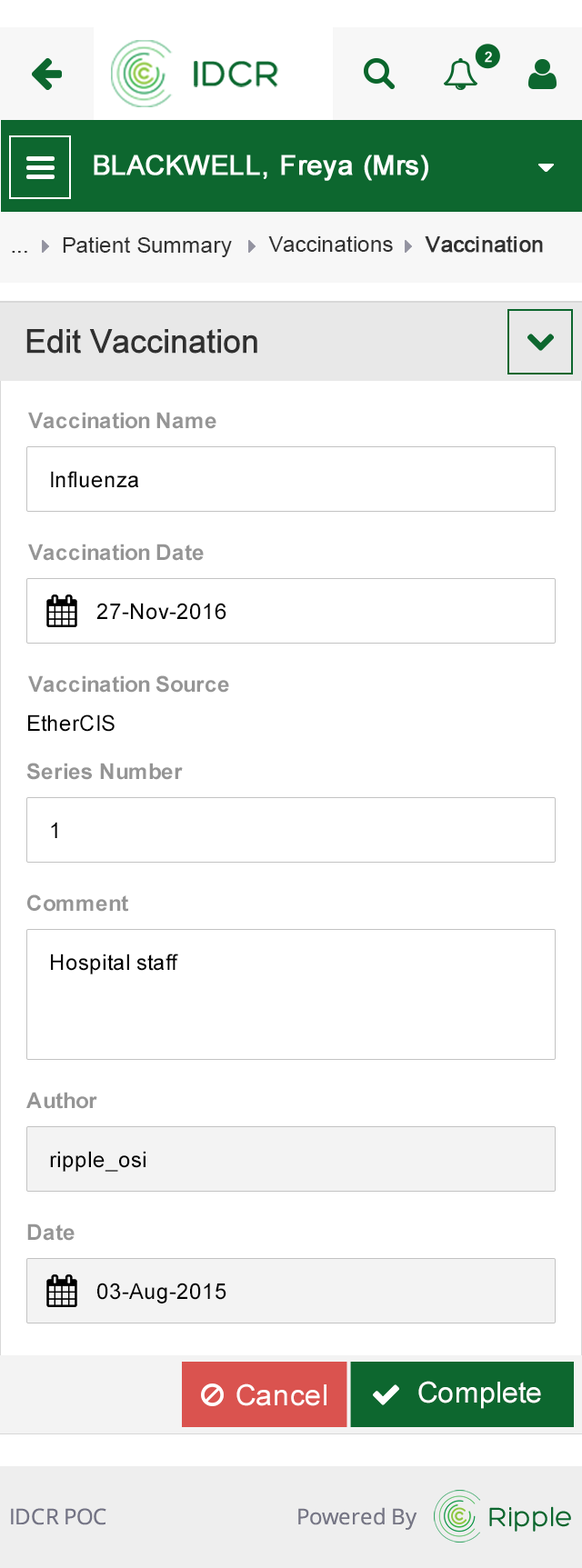
<style>
.page{position:relative;width:582px;height:1568px;background:#ffffff}
.page>*{position:absolute;margin:0}
.t1{font:21.8px "ArialMT";color:#313131}
.t2{font:21.8px "ArialMT";color:#313131;font-weight:bold}
.t3{font:32.7px "ArialMT";color:#303030;font-weight:bold}
.t4{font:21.8px "Arial-BoldMT";color:#959595}
.t5{font:21.8px "ArialMT";color:#000000}
.t6{font:29.1px "ArialMT";color:#ffffff}
</style>
<div class="page">
<p class="t1" style="left:63px;top:236px;width:169px;height:21px">Patient Summary</p>
<p class="t1" style="left:268px;top:235px;width:125px;height:17px">Vaccinations</p>
<p class="t2" style="left:424px;top:235px;width:119px;height:18px">Vaccination</p>
<p class="t1" style="left:12px;top:251px;width:15px;height:2px">...</p>
<p class="t3" style="left:26px;top:329px;width:231px;height:25px">Edit Vaccination</p>
<p class="t4" style="left:28px;top:412px;width:188px;height:17px">Vaccination Name</p>
<p class="t5" style="left:51px;top:471px;width:88px;height:17px">Influenza</p>
<p class="t4" style="left:28px;top:544px;width:176px;height:17px">Vaccination Date</p>
<p class="t5" style="left:96px;top:603px;width:130px;height:17px">27-Nov-2016</p>
<p class="t4" style="left:28px;top:675px;width:201px;height:18px">Vaccination Source</p>
<p class="t5" style="left:28px;top:714px;width:87px;height:18px">EtherCIS</p>
<p class="t4" style="left:26px;top:763px;width:157px;height:17px">Series Number</p>
<p class="t5" style="left:51px;top:822px;width:6px;height:16px">1</p>
<p class="t4" style="left:27px;top:894px;width:101px;height:18px">Comment</p>
<p class="t5" style="left:51px;top:954px;width:127px;height:20px">Hospital staff</p>
<p class="t4" style="left:26px;top:1092px;width:71px;height:17px">Author</p>
<p class="t5" style="left:50px;top:1151px;width:95px;height:21px">ripple_osi</p>
<p class="t4" style="left:27px;top:1223px;width:48px;height:18px">Date</p>
<p class="t5" style="left:97px;top:1283px;width:129px;height:20px">03-Aug-2015</p>
<p class="t6" style="left:236px;top:1383px;width:90px;height:23px">Cancel</p>
<p class="t6" style="left:418px;top:1381px;width:123px;height:28px">Complete</p>
</div>
